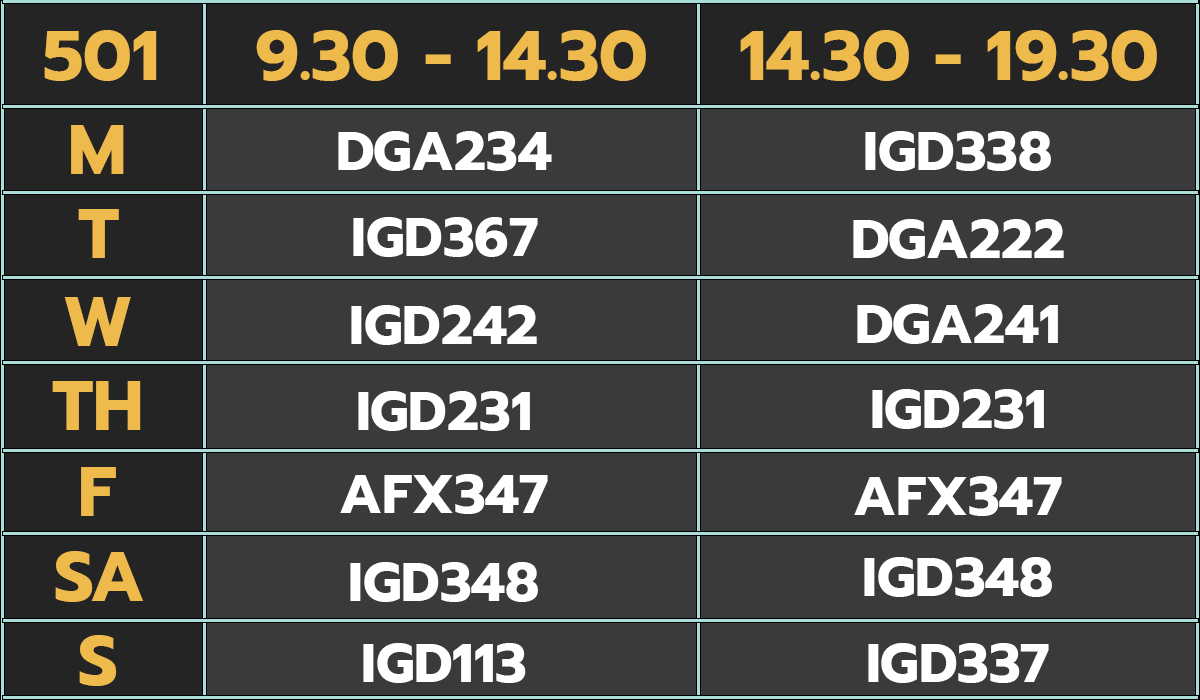
<style>
.page{position:relative;width:1200px;height:700px;background:#3a3a3c}
.page>*{position:absolute;margin:0}
.t1{font:70px "Prompt-Bold";color:#eeba4c}
.t2{font:55px "Prompt-Bold";color:#ffffff}
</style>
<div class="page">
<p class="t1" style="left:44px;top:30px;width:113px;height:51px">501</p>
<p class="t1" style="left:256px;top:30px;width:390px;height:51px">9.30 - 14.30</p>
<p class="t1" style="left:740px;top:30px;width:417px;height:51px">14.30 - 19.30</p>
<p class="t1" style="left:71px;top:125px;width:53px;height:49px">M</p>
<p class="t2" style="left:338px;top:131px;width:214px;height:40px">DGA234</p>
<p class="t2" style="left:865px;top:131px;width:186px;height:40px">IGD338</p>
<p class="t1" style="left:78px;top:209px;width:41px;height:49px">T</p>
<p class="t2" style="left:353px;top:217px;width:185px;height:40px">IGD367</p>
<p class="t2" style="left:853px;top:219px;width:211px;height:40px">DGA222</p>
<p class="t1" style="left:64px;top:297px;width:67px;height:49px">W</p>
<p class="t2" style="left:351px;top:305px;width:186px;height:40px">IGD242</p>
<p class="t2" style="left:857px;top:304px;width:201px;height:40px">DGA241</p>
<p class="t1" style="left:52px;top:381px;width:89px;height:49px">TH</p>
<p class="t2" style="left:872px;top:389px;width:172px;height:40px">IGD231</p>
<p class="t2" style="left:358px;top:391px;width:172px;height:40px">IGD231</p>
<p class="t1" style="left:81px;top:467px;width:35px;height:49px">F</p>
<p class="t2" style="left:340px;top:474px;width:208px;height:40px">AFX347</p>
<p class="t2" style="left:854px;top:476px;width:208px;height:40px">AFX347</p>
<p class="t1" style="left:55px;top:551px;width:89px;height:51px">SA</p>
<p class="t2" style="left:864px;top:557px;width:188px;height:40px">IGD348</p>
<p class="t2" style="left:350px;top:562px;width:188px;height:40px">IGD348</p>
<p class="t1" style="left:79px;top:635px;width:38px;height:51px">S</p>
<p class="t2" style="left:363px;top:643px;width:163px;height:40px">IGD113</p>
<p class="t2" style="left:868px;top:643px;width:181px;height:40px">IGD337</p>
</div>
